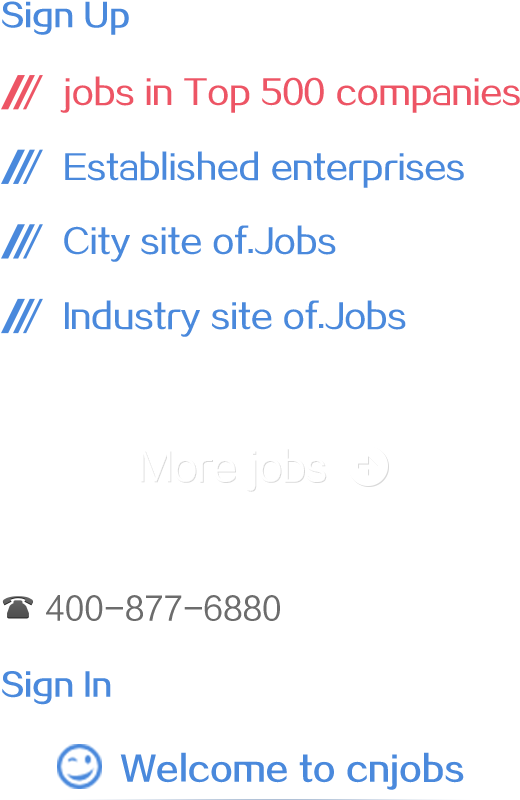
<style>
.page{position:relative;width:520px;height:800px;background:#ffffff}
.page>*{position:absolute;margin:0}
.t1{font:30.2px "FZZZHONGJW--GB1-0";color:#4a89dc}
.t2{font:32.3px "FZZZHUNHJW--GB1-0";color:#ed5565}
.t3{font:32.3px "FZZZHUNHJW--GB1-0";color:#4a89dc}
.t4{font:32.3px "FZLTHK--GBK1-0";color:#6c6c6c}
.t5{font:32.3px "FZZZHONGJW--GB1-0";color:#4a89dc}
</style>
<div class="page">
<p class="t1" style="left:2px;top:1px;width:127px;height:34px">Sign Up</p>
<p class="t2" style="left:60px;top:76px;width:460px;height:37px">jobs in Top 500 companies</p>
<p class="t3" style="left:65px;top:151px;width:399px;height:37px">Established enterprises</p>
<p class="t3" style="left:64px;top:225px;width:272px;height:37px">City site of.Jobs</p>
<p class="t3" style="left:65px;top:300px;width:341px;height:37px">Industry site of.Jobs</p>
<p class="t4" style="left:46px;top:595px;width:234px;height:26px">400-877-6880</p>
<p class="t1" style="left:2px;top:671px;width:109px;height:34px">Sign In</p>
<p class="t5" style="left:120px;top:752px;width:344px;height:38px">Welcome to cnjobs</p>
</div>
